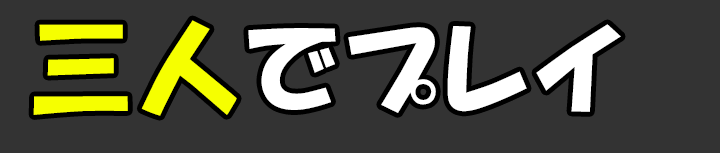
<style>
.page{position:relative;width:720px;height:153px;background:#333333}
.page>*{position:absolute;margin:0}
.t1{font:100px "HGPSoeiKakupoptai";letter-spacing:0.075em;color:#ffffff}
.t2{font:100px "HGPSoeiKakupoptai";letter-spacing:0.075em;color:#f6ff00}
</style>
<div class="page">
<p class="t1" style="left:33px;top:20px;width:588px;height:96px"><span class="t2">三人</span>でプレイ</p>
</div>
